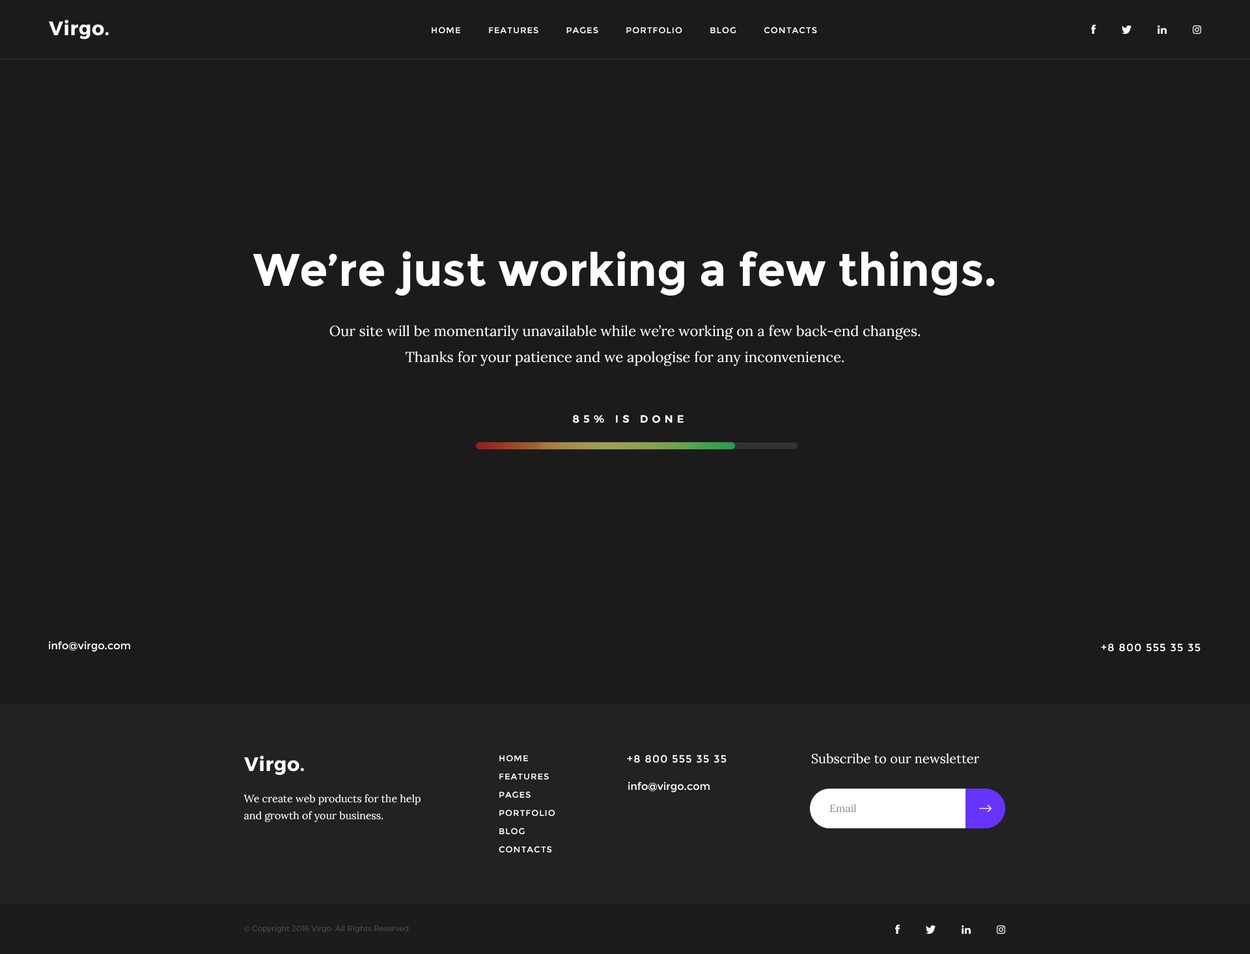
<style>
.page{position:relative;width:1250px;height:954px;background:#1b1b1b}
.page>*{position:absolute;margin:0}
.t1{font:8.5px "Montserrat-Regular";letter-spacing:0.08em;color:#ffffff;text-transform:uppercase}
.t2{font:45.8px "Montserrat-Bold";color:#ffffff}
.t3{font:14.4px/26px "Lora-Regular";color:#ffffff}
.t4{font:10.4px "Montserrat-SemiBold";letter-spacing:0.4em;color:#ffffff;text-transform:uppercase}
.t5{font:10.4px "Montserrat-Regular";color:#ffffff}
.t6{font:10.4px "Montserrat-Regular";letter-spacing:0.08em;color:#ffffff;text-transform:uppercase}
.t7{font:8.5px/18.2px "Montserrat-Regular";letter-spacing:0.08em;color:#ffffff;text-transform:uppercase}
.t8{font:13px "Lora-Regular";color:#fefefe}
.t9{font:10.4px/16.9px "Lora-Regular";color:#fefefe}
.t10{font:10.4px "Lora-Regular";color:#8a8a8a}
.t11{font:7.8px "Montserrat-Light";color:#525252}
</style>
<div class="page">
<p class="t1" style="left:432px;top:27px;width:385px;height:6px">home         features         pages         portfolio         blog         contacts</p>
<p class="t2" style="left:253px;top:251px;width:742px;height:45px">We’re just working a few things. out</p>
<p class="t3" style="left:329px;top:325px;width:591px;height:41px;text-align:center">Our site will be momentarily unavailable while we’re working on a few back-end changes. <br>Thanks for your patience and we apologise for any inconvenience.</p>
<p class="t4" style="left:573px;top:415px;width:111px;height:8px">85% is done</p>
<p class="t5" style="left:49px;top:641px;width:81px;height:11px">info@virgo.com</p>
<p class="t6" style="left:1101px;top:643px;width:100px;height:9px">+8 800 555 35 35</p>
<p class="t7" style="left:499px;top:755px;width:56px;height:97px">home<br>features<br>pages<br>portfolio<br>blog<br>contacts</p>
<p class="t6" style="left:627px;top:755px;width:100px;height:8px">+8 800 555 35 35</p>
<p class="t8" style="left:812px;top:753px;width:167px;height:11px">Subscribe to our newsletter</p>
<p class="t5" style="left:628px;top:781px;width:82px;height:11px">info@virgo.com</p>
<p class="t9" style="left:244px;top:794px;width:177px;height:28px">We create web products for the help and growth of your business.</p>
<p class="t10" style="left:830px;top:804px;width:26px;height:9px">Email</p>
<p class="t11" style="left:244px;top:925px;width:164px;height:8px">© Copyright 2016 Virgo. All Rights Reserved</p>
</div>
